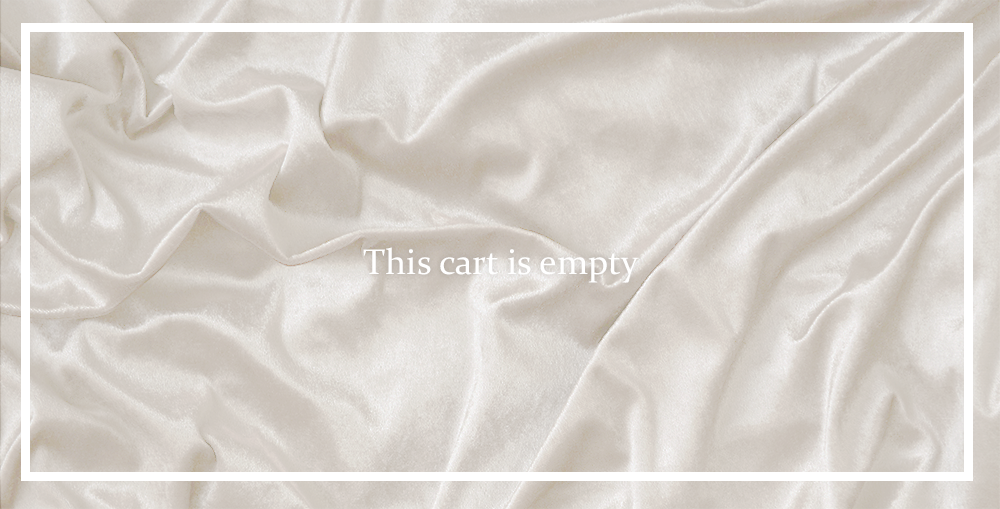
<style>
.page{position:relative;width:1000px;height:509px}
.page>*{position:absolute;margin:0}
.t1{font:36px "Constantia";color:#ffffff}
</style>
<div class="page">
<p class="t1" style="left:363px;top:247px;width:276px;height:36px">This cart is empty</p>
</div>
